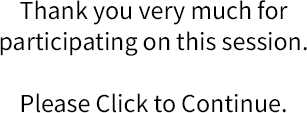
<style>
.page{position:relative;width:307px;height:113px;background:#ffffff}
.page>*{position:absolute;margin:0}
.t1{font:26px "SourceSansPro-Regular";color:#000000}
</style>
<div class="page">
<p class="t1" style="left:0px;top:0px;width:307px;height:113px;text-align:center">Thank you very much for participating on this session.<br><br>Please Click to Continue.</p>
</div>
